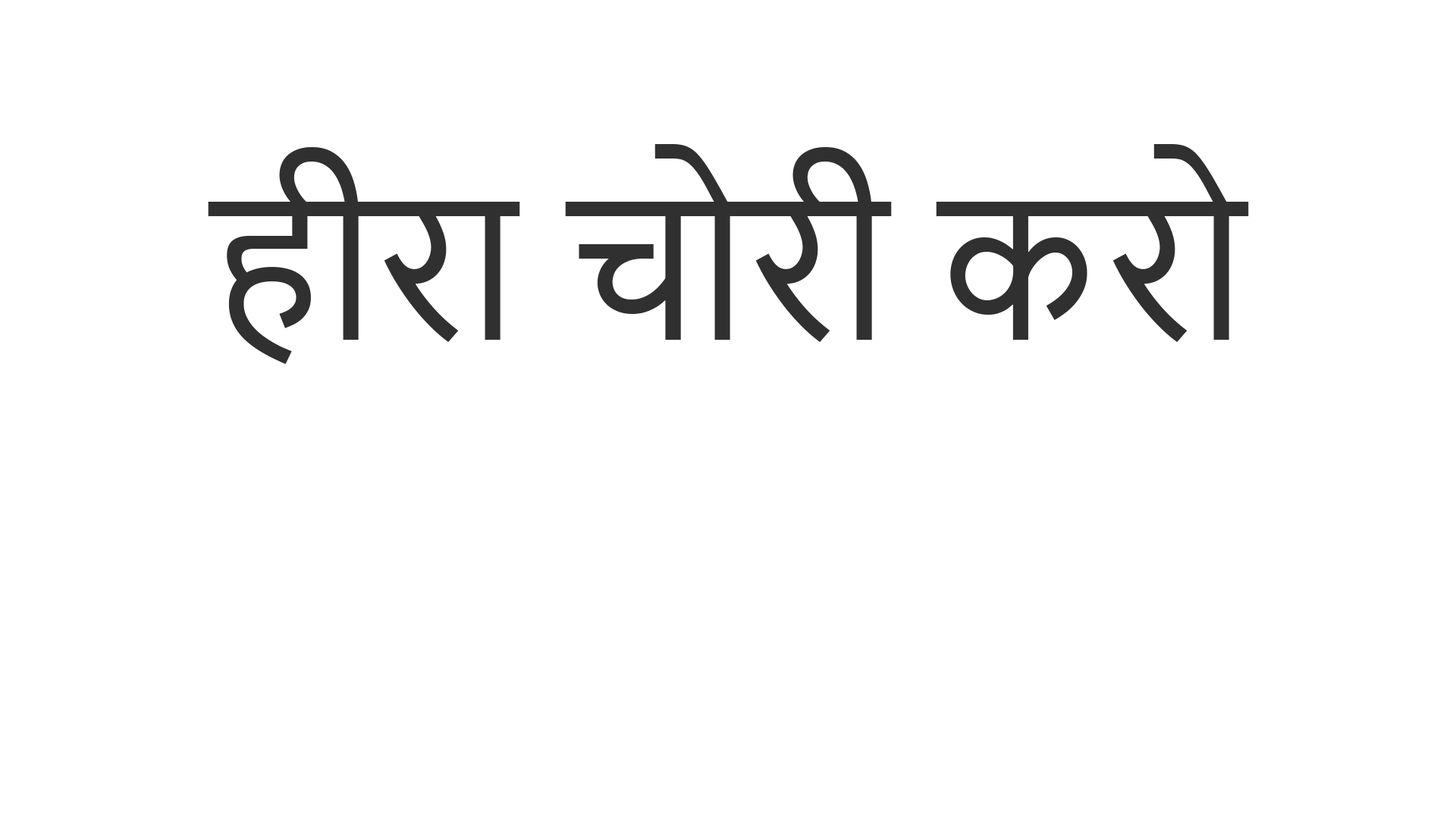
<style>
.page{position:relative;width:1456px;height:819px;background:#ffffff}
.page>*{position:absolute;margin:0}
.t1{font:189.6px "NirmalaUI";color:#303030}
</style>
<div class="page">
<p class="t1" style="left:208px;top:144px;width:1041px;height:220px">हीरा चोरी करो</p>
</div>
